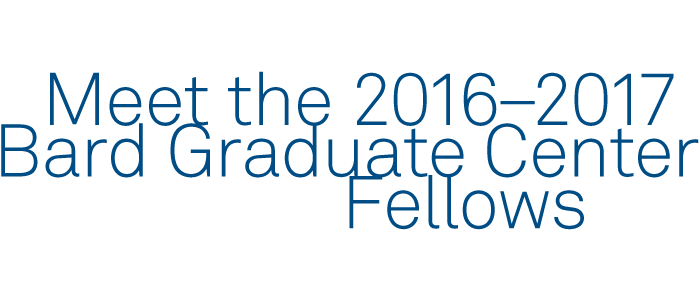
<style>
.page{position:relative;width:700px;height:300px;background:#ffffff}
.page>*{position:absolute;margin:0}
.t1{font:73.8px/51.6px "AkkuratStd-Light";color:#004c84}
</style>
<div class="page">
<p class="t1" style="left:1px;top:71px;width:698px;height:159px">Meet the 2016–2017 <br>Bard Graduate Center <br>Fellows</p>
</div>
